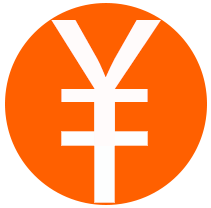
<style>
.page{position:relative;width:211px;height:208px;background:#ff6000}
.page>*{position:absolute;margin:0}
.t1{font:170.4px "AdobeHeitiStd-Regular";color:#fffbfb}
</style>
<div class="page">
<p class="t1" style="left:51px;top:20px;width:110px;height:126px">￥</p>
</div>
